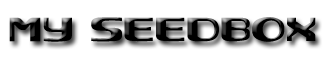
<style>
.page{position:relative;width:325px;height:60px;background:#ffffff}
.page>*{position:absolute;margin:0}
.t1{font:34px "NEC";color:#000000}
</style>
<div class="page">
<p class="t1" style="left:9px;top:17px;width:307px;height:25px">MY SEEDBOX</p>
</div>
